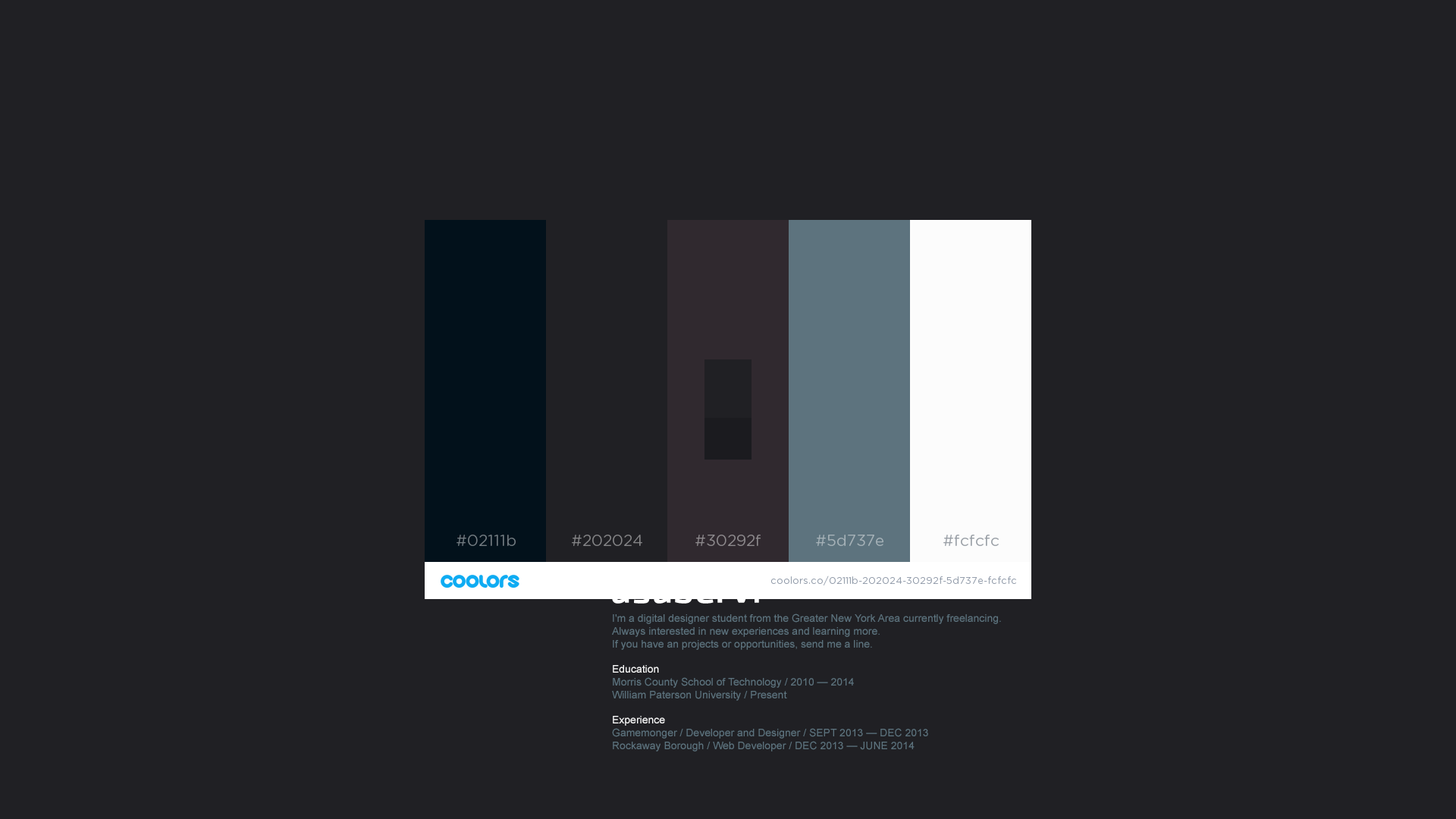
<style>
.page{position:relative;width:1456px;height:819px;background:#202024}
.page>*{position:absolute;margin:0}
.t1{font:10.6px "ArialMT";color:#5d737e}
.t2{font:10.6px "ArialMT";color:#fcfcfc}
</style>
<div class="page">
<p class="t1" style="left:612px;top:613px;width:389px;height:138px">I'm a digital designer student from the Greater New York Area currently freelancing.<br>Always interested in new experiences and learning more.<br>If you have an projects or opportunities, send me a line.<br><br><span class="t2">Education<br></span>Morris County School of Technology / 2010 — 2014 <br>William Paterson University / Present <br><br><span class="t2">Experience<br></span>Gamemonger / Developer and Designer / SEPT 2013 — DEC 2013<br>Rockaway Borough / Web Developer / DEC 2013 — JUNE 2014</p>
</div>
